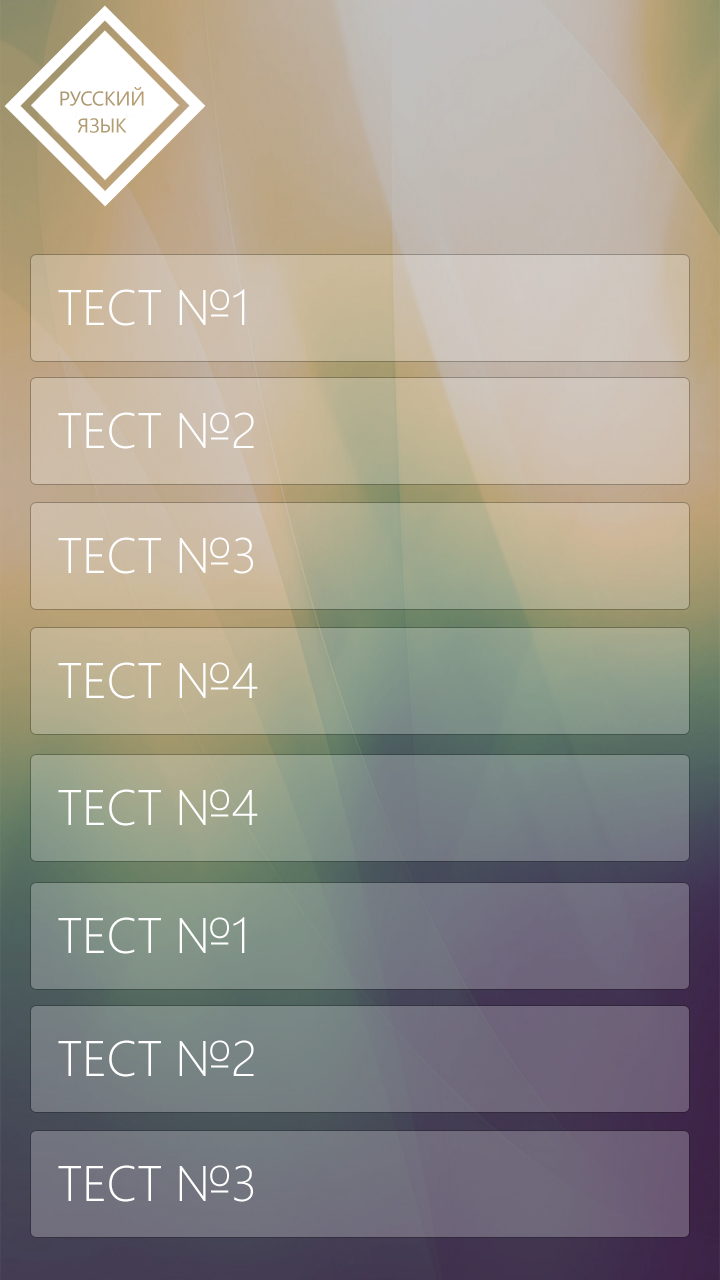
<style>
.page{position:relative;width:720px;height:1280px}
.page>*{position:absolute;margin:0}
.t1{font:50px "SegoeUI-Light";letter-spacing:-0.01em;color:#ffffff}
</style>
<div class="page">
<p class="t1" style="left:58px;top:289px;width:187px;height:37px">ТЕСТ №1</p>
<p class="t1" style="left:58px;top:412px;width:196px;height:37px">ТЕСТ №2</p>
<p class="t1" style="left:58px;top:537px;width:195px;height:37px">ТЕСТ №3</p>
<p class="t1" style="left:58px;top:662px;width:200px;height:37px">ТЕСТ №4</p>
<p class="t1" style="left:58px;top:789px;width:200px;height:37px">ТЕСТ №4</p>
<p class="t1" style="left:58px;top:917px;width:187px;height:37px">ТЕСТ №1</p>
<p class="t1" style="left:58px;top:1040px;width:196px;height:37px">ТЕСТ №2</p>
<p class="t1" style="left:58px;top:1165px;width:195px;height:37px">ТЕСТ №3</p>
</div>
